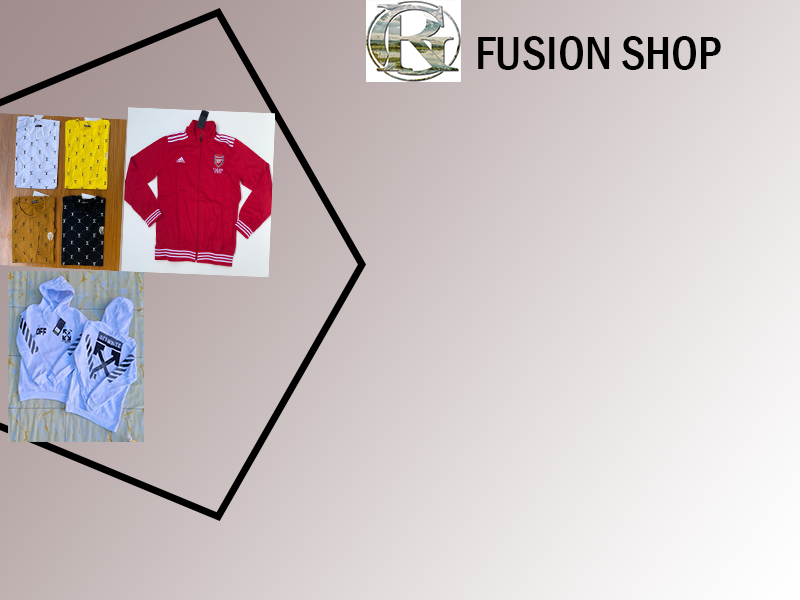
<style>
.page{position:relative;width:800px;height:600px}
.page>*{position:absolute;margin:0}
.t1{font:48px "FranklinGothic-MediumCond";color:#000000}
</style>
<div class="page">
<p class="t1" style="left:478px;top:36px;width:243px;height:34px">FUSION SHOP</p>
</div>
